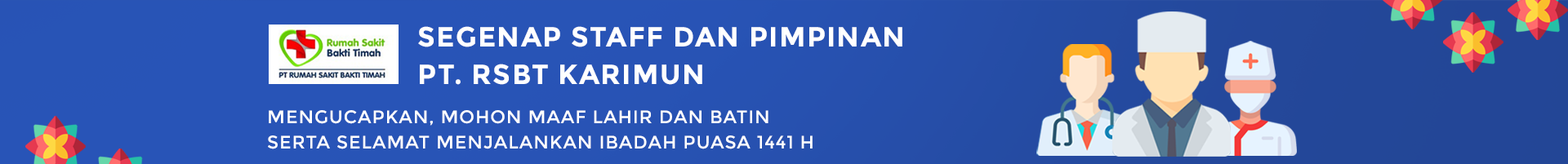
<style>
.page{position:relative;width:1568px;height:164px}
.page>*{position:absolute;margin:0}
.t1{font:13.3px/37.7px "Montserrat-Bold";letter-spacing:0.04em;color:#ffffff}
.t2{font:8.8px/24.7px "Montserrat-Regular";letter-spacing:0.04em;color:#ffffff}
</style>
<div class="page">
<p class="t1" style="left:418px;top:26px;width:484px;height:59px;text-align:right">SEGENAP STAFF DAN PIMPINAN<br>PT. RSBT KARIMUN</p>
<p class="t2" style="left:268px;top:110px;width:545px;height:39px;text-align:right">MENGUCAPKAN, MOHON MAAF LAHIR DAN BATIN<br>SERTA SELAMAT MENJALANKAN IBADAH PUASA 1441 H</p>
</div>
